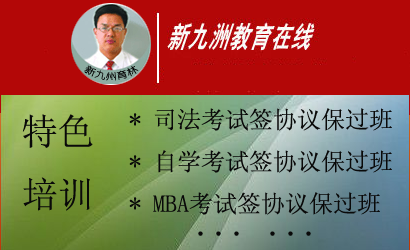
<style>
.page{position:relative;width:410px;height:250px;background:#b30707}
.page>*{position:absolute;margin:0}
.t1{font:24px "SimSun";color:#090909}
.t2{font:36px "SimSun";color:#090909}
</style>
<div class="page">
<p class="t1" style="left:129px;top:108px;width:263px;height:107px">* 司法考试签协议保过班<br>* 自学考试签协议保过班<br>* MBA考试签协议保过班</p>
<p class="t2" style="left:22px;top:114px;width:71px;height:97px">特色<br>培训</p>
<p class="t2" style="left:198px;top:231px;width:113px;height:5px">... ...</p>
</div>
